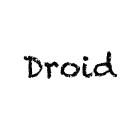
<style>
.page{position:relative;width:140px;height:140px;background:#ffffff}
.page>*{position:absolute;margin:0}
.t1{font:30px "Chalkduster";color:#050505}
</style>
<div class="page">
<p class="t1" style="left:23px;top:51px;width:95px;height:28px">Droid</p>
</div>
